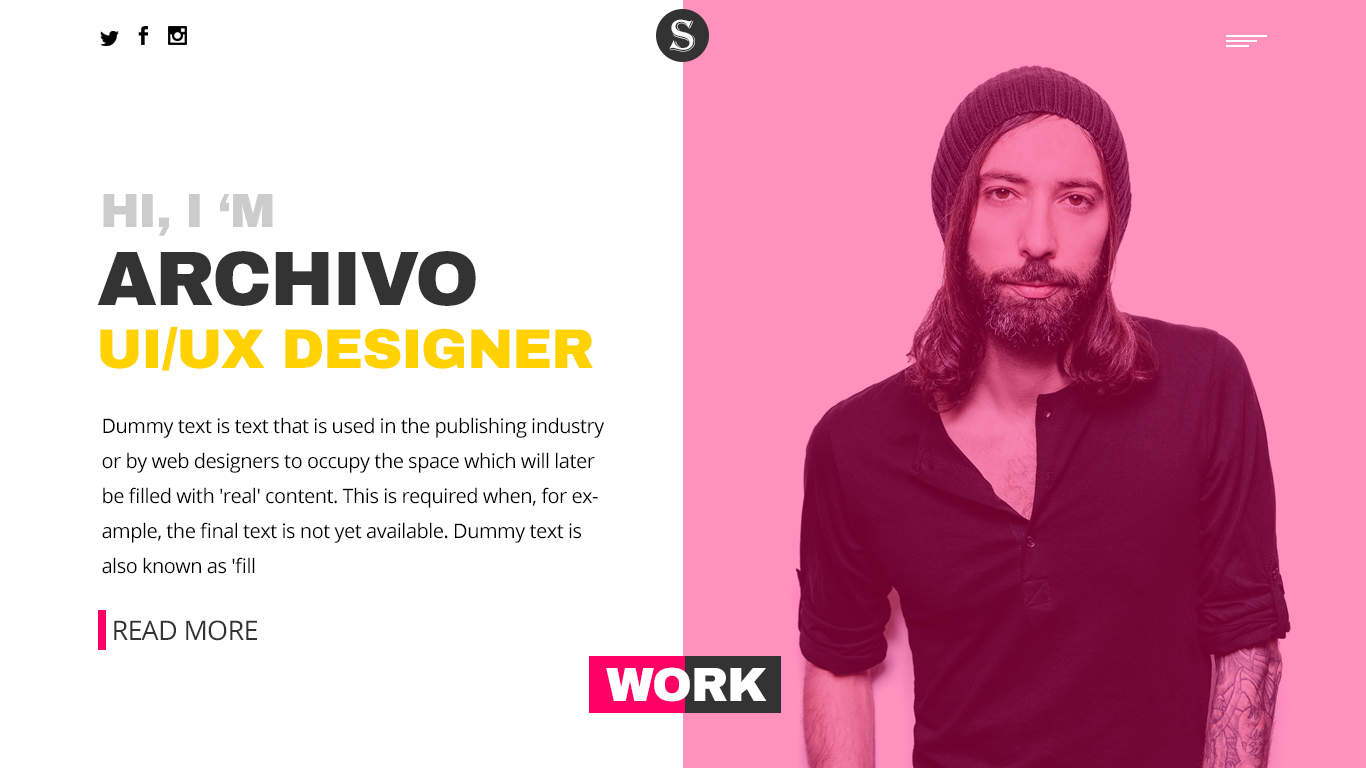
<style>
.page{position:relative;width:1366px;height:768px;background:#ffffff}
.page>*{position:absolute;margin:0}
.t1{font:46px "Algerian";letter-spacing:-0.025em;color:#ffffff;text-transform:uppercase}
.t2{font:48px "ArchivoBlack-Regular";letter-spacing:-0.025em;color:#cccccc;text-transform:uppercase}
.t3{font:77px "ArchivoBlack-Regular";letter-spacing:-0.025em;color:#333333;text-transform:uppercase}
.t4{font:56px "ArchivoBlack-Regular";letter-spacing:-0.025em;color:#ffd200;text-transform:uppercase}
.t5{font:20px/35px "OpenSans";letter-spacing:-0.025em;color:#000000}
.t6{font:27px "OpenSans";letter-spacing:-0.025em;color:#333333;text-transform:uppercase}
.t7{font:48px "ArchivoBlack-Regular";letter-spacing:-0.025em;color:#ffffff;text-transform:uppercase}
</style>
<div class="page">
<p class="t1" style="left:669px;top:19px;width:26px;height:33px">S</p>
<p class="t2" style="left:103px;top:194px;width:170px;height:42px">HI, I ‘m</p>
<p class="t3" style="left:97px;top:251px;width:379px;height:55px">Archivo</p>
<p class="t4" style="left:100px;top:326px;width:493px;height:45px">UI/UX Designer</p>
<p class="t5" style="left:102px;top:417px;width:503px;height:157px">Dummy text is text that is used in the publishing industry or by web designers to occupy the space which will later be filled with 'real' content. This is required when, for example, the final text is not yet available. Dummy text is also known as 'fill</p>
<p class="t6" style="left:114px;top:620px;width:143px;height:21px">Read More</p>
<p class="t7" style="left:606px;top:667px;width:161px;height:35px">WORK</p>
</div>
